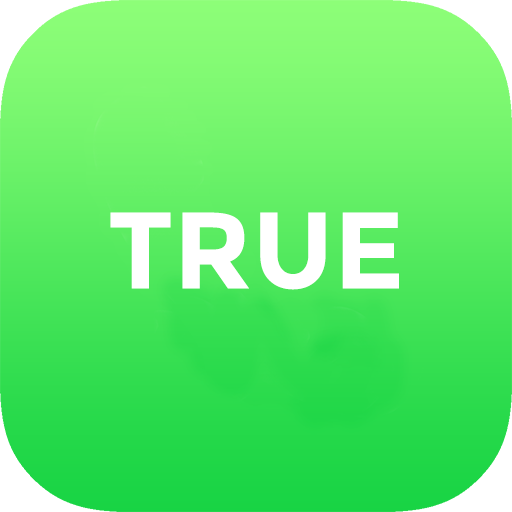
<style>
.page{position:relative;width:512px;height:512px}
.page>*{position:absolute;margin:0}
.t1{font:108.4px "Montserrat-Bold";color:#ffffff}
</style>
<div class="page">
<p class="t1" style="left:110px;top:212px;width:289px;height:78px">TRUE</p>
</div>
